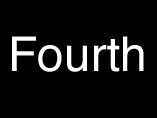
<style>
.page{position:relative;width:157px;height:118px;background:#000000}
.page>*{position:absolute;margin:0}
.t1{font:48px "Helvetica";color:#ffffff}
</style>
<div class="page">
<p class="t1" style="left:12px;top:36px;width:132px;height:36px">Fourth</p>
</div>
